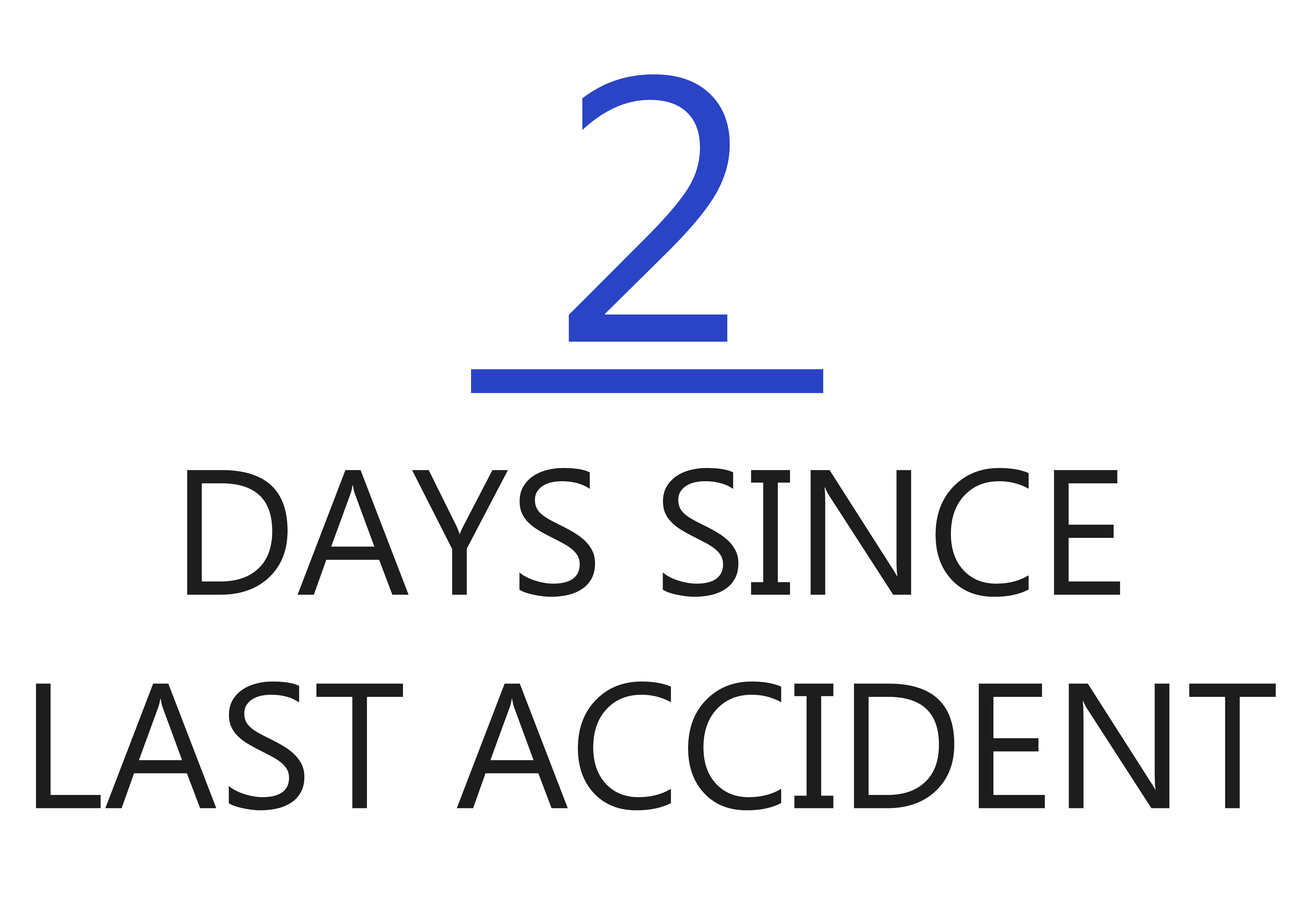
<style>
.page{position:relative;width:1299px;height:918px;background:#ffffff}
.page>*{position:absolute;margin:0}
.t1{font:375.6px "MicrosoftPhagsPa";color:#2a44c6}
.t2{font:178px "MicrosoftPhagsPa";color:#1d1d1d}
</style>
<div class="page">
<p class="t1" style="left:569px;top:74px;width:161px;height:268px">2</p>
<p class="t2" style="left:36px;top:468px;width:1240px;height:343px;text-align:center">DAYS SINCE<br>LAST ACCIDENT</p>
</div>
